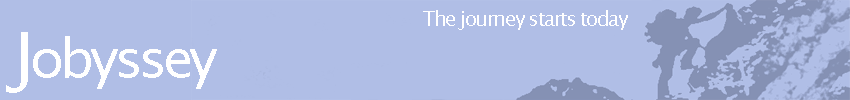
<style>
.page{position:relative;width:850px;height:100px;background:#b0bee6}
.page>*{position:absolute;margin:0}
.t1{font:20px "LucidaSans";letter-spacing:-0.075em;color:#ffffff}
.t2{font:70px "LucidaSans";letter-spacing:-0.05em;color:#ffffff}
.t3{font:55px "LucidaSans";letter-spacing:-0.075em;color:#ffffff}
</style>
<div class="page">
<p class="t1" style="left:423px;top:10px;width:205px;height:20px">The journey starts today</p>
<p class="t2" style="left:6px;top:32px;width:22px;height:61px">J</p>
<p class="t3" style="left:33px;top:36px;width:184px;height:53px">obyssey</p>
</div>
